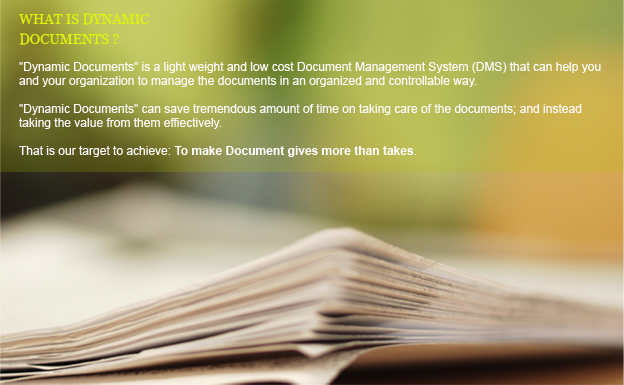
<style>
.page{position:relative;width:624px;height:385px}
.page>*{position:absolute;margin:0}
.t1{font:14px/20px "Georgia";color:#e0f30b;text-transform:uppercase}
.t2{font:12px/14px "ArialMT";color:#fdfbfb}
.t3{font:12px/14px "Arial-BoldMT";color:#fdfbfb}
</style>
<div class="page">
<p class="t1" style="left:19px;top:13px;width:130px;height:32px">What is Dynamic Documents ?</p>
<p class="t2" style="left:19px;top:62px;width:582px;height:95px">"Dynamic Documents" is a light weight and low cost Document Management System (DMS) that can help you and your organization to manage the documents in an organized and controllable way. <br><br>"Dynamic Documents" can save tremendous amount of time on taking care of the documents; and instead taking the value from them effiectively. <br><br>That is our target to achieve: <span class="t3">To make Document gives more than takes</span>.</p>
</div>
